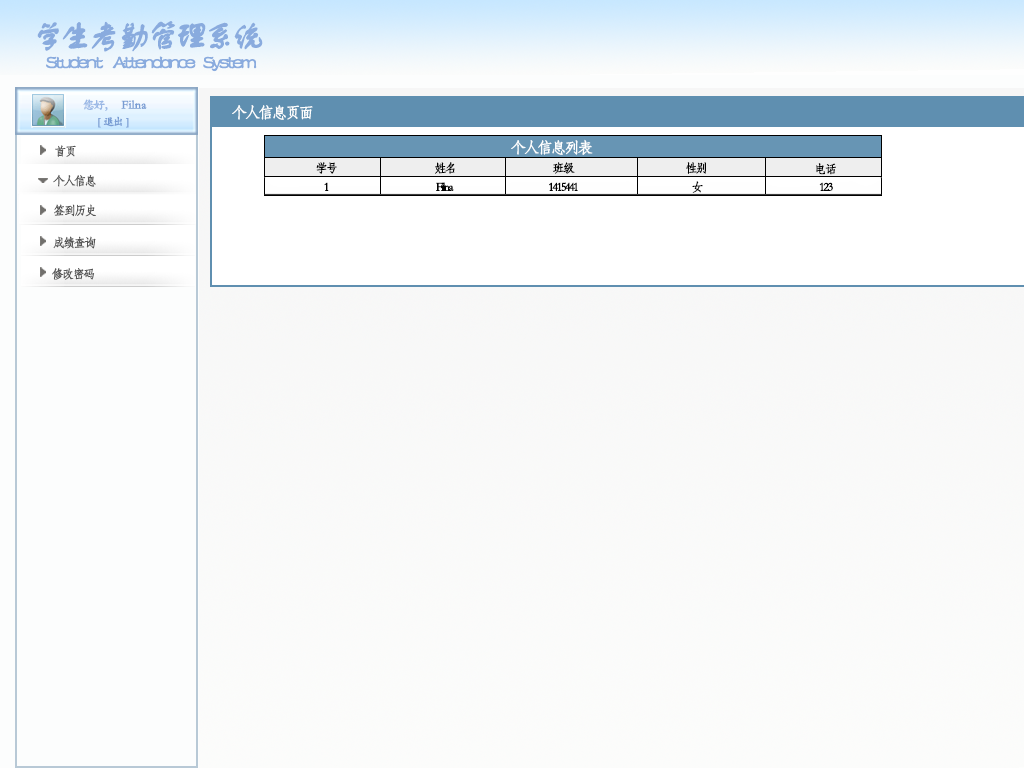
<style>
.page{position:relative;width:1024px;height:768px}
.page>*{position:absolute;margin:0}
.t1{font:32.7px "FZSTK--GBK1-0";letter-spacing:-0.15em;color:#89abde;font-weight:bold}
.t2{font:19.6px "FZSTK--GBK1-0";letter-spacing:-0.15em;color:#89abde;font-weight:bold}
.t3{font:12px "STKaiti";letter-spacing:-0.15em;color:#99b7e5;font-weight:bold}
.t4{font:12px "STKaiti";color:#789cd3;font-weight:bold}
.t5{font:15.3px "STFangsong";letter-spacing:-0.15em;color:#fdfefe;font-weight:bold}
.t6{font:10.9px "STKaiti";letter-spacing:-0.15em;color:#789cd3;font-weight:bold}
.t7{font:12px "STFangsong";letter-spacing:-0.15em;color:#555555;font-weight:bold}
.t8{font:12px "STFangsong";letter-spacing:-0.15em;color:#020202;font-weight:bold}
</style>
<div class="page">
<p class="t1" style="left:37px;top:21px;width:226px;height:31px">学生考勤管理系统</p>
<p class="t2" style="left:46px;top:56px;width:211px;height:16px">Student     Attendance    System</p>
<p class="t3" style="left:83px;top:99px;width:25px;height:12px">您好，</p>
<p class="t4" style="left:121px;top:100px;width:26px;height:9px">Filna</p>
<p class="t5" style="left:232px;top:105px;width:81px;height:15px">个人信息页面</p>
<p class="t6" style="left:98px;top:116px;width:31px;height:12px">[   退出   ]</p>
<p class="t7" style="left:55px;top:145px;width:21px;height:12px">首页</p>
<p class="t5" style="left:511px;top:139px;width:82px;height:16px">个人信息列表</p>
<p class="t7" style="left:53px;top:174px;width:43px;height:13px">个人信息</p>
<p class="t8" style="left:316px;top:162px;width:21px;height:12px">学号</p>
<p class="t8" style="left:435px;top:162px;width:20px;height:12px">姓名</p>
<p class="t8" style="left:553px;top:162px;width:22px;height:12px">班级</p>
<p class="t8" style="left:686px;top:162px;width:20px;height:12px">性别</p>
<p class="t8" style="left:816px;top:163px;width:20px;height:12px">电话</p>
<p class="t8" style="left:324px;top:182px;width:5px;height:9px">1</p>
<p class="t8" style="left:436px;top:182px;width:18px;height:9px">Filna</p>
<p class="t8" style="left:549px;top:182px;width:29px;height:9px">1415441</p>
<p class="t8" style="left:692px;top:181px;width:11px;height:12px">女</p>
<p class="t8" style="left:819px;top:182px;width:14px;height:9px">123</p>
<p class="t7" style="left:54px;top:204px;width:42px;height:13px">签到历史</p>
<p class="t7" style="left:53px;top:236px;width:43px;height:13px">成绩查询</p>
<p class="t7" style="left:52px;top:268px;width:43px;height:12px">修改密码</p>
</div>
